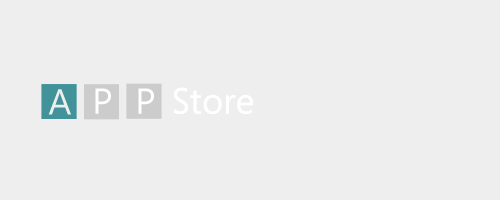
<style>
.page{position:relative;width:500px;height:200px;background:#eeeeee}
.page>*{position:absolute;margin:0}
.t1{font:36px "SegoeUI-Regular";color:#eeeeee}
.t2{font:36px "SegoeUI-Regular";color:#ffffff}
</style>
<div class="page">
<p class="t1" style="left:48px;top:89px;width:23px;height:26px">A</p>
<p class="t2" style="left:95px;top:88px;width:16px;height:26px">P</p>
<p class="t2" style="left:138px;top:88px;width:16px;height:26px">P</p>
<p class="t2" style="left:174px;top:87px;width:79px;height:27px">Store</p>
</div>
